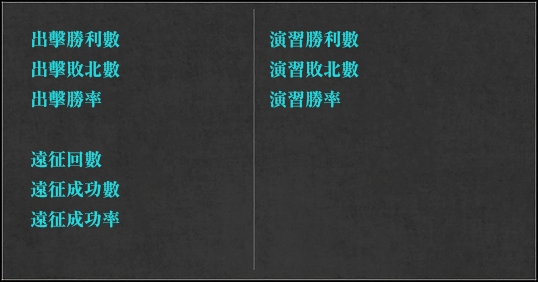
<style>
.page{position:relative;width:538px;height:282px}
.page>*{position:absolute;margin:0}
.t1{font:18px/30px "RyuminPr6N-ExBold";color:#1edce0}
</style>
<div class="page">
<p class="t1" style="left:30px;top:30px;width:90px;height:198px">出擊勝利數<br>出擊敗北數<br>出擊勝率<br><br>遠征回數<br>遠征成功數<br>遠征成功率</p>
<p class="t1" style="left:269px;top:30px;width:90px;height:78px">演習勝利數<br>演習敗北數<br>演習勝率</p>
</div>
